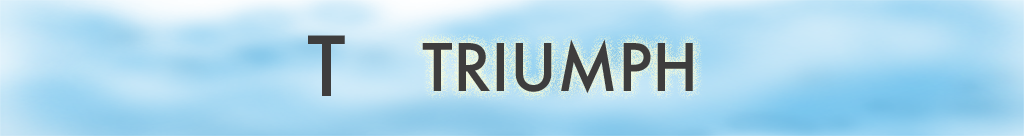
<style>
.page{position:relative;width:1024px;height:136px}
.page>*{position:absolute;margin:0}
.t1{font:80.2px "Futura-Medium";color:#3e3d3d}
.t2{font:63.4px "Futura-Medium";color:#3e3d3d}
</style>
<div class="page">
<p class="t1" style="left:308px;top:35px;width:37px;height:61px">T</p>
<p class="t2" style="left:422px;top:39px;width:271px;height:55px">TRIUMPH</p>
</div>
